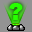
<style>
.page{position:relative;width:32px;height:32px;background:#939393}
.page>*{position:absolute;margin:0}
.t1{font:24px "Arial-Black";color:#27ff00}
</style>
<div class="page">
<p class="t1" style="left:9px;top:3px;width:14px;height:17px">?</p>
</div>
